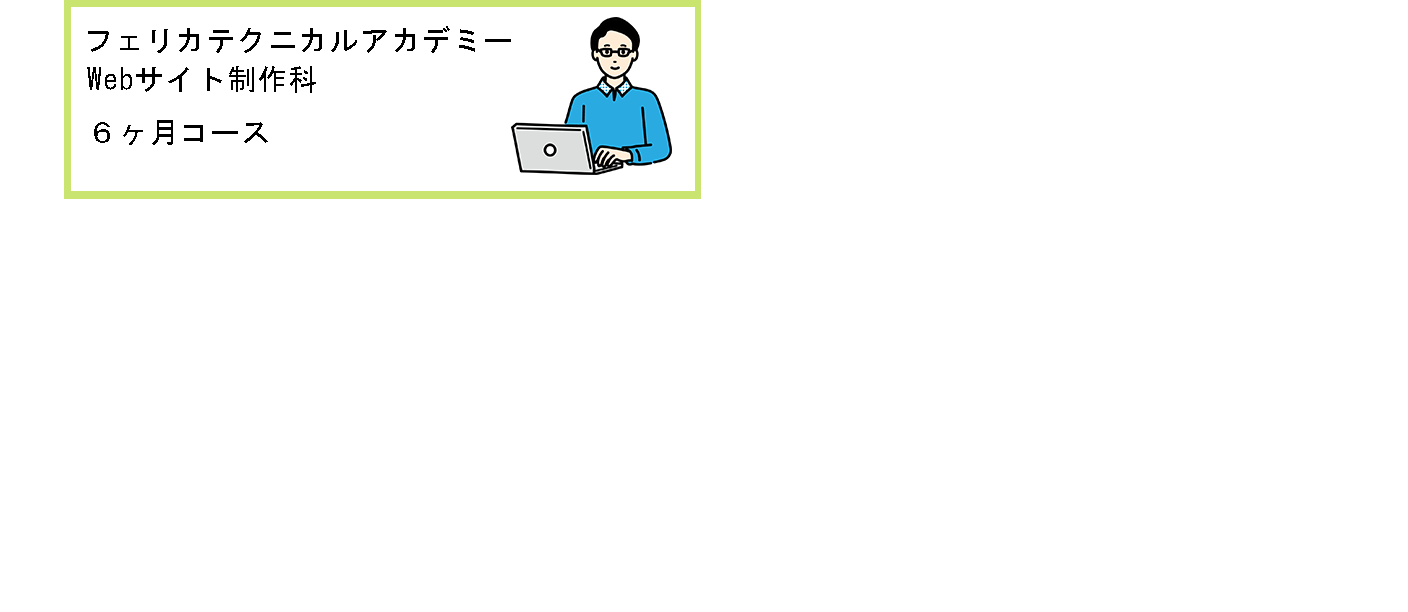
<style>
.page{position:relative;width:1408px;height:612px;background:#ffffff}
.page>*{position:absolute;margin:0}
.t1{font:30px "MS-Gothic";letter-spacing:0.025em;color:#000000}
</style>
<div class="page">
<p class="t1" style="left:88px;top:26px;width:423px;height:27px">フェリカテクニカルアカデミー</p>
<p class="t1" style="left:87px;top:66px;width:229px;height:79px">Webサイト制作科<br>６ヶ月コース</p>
</div>
